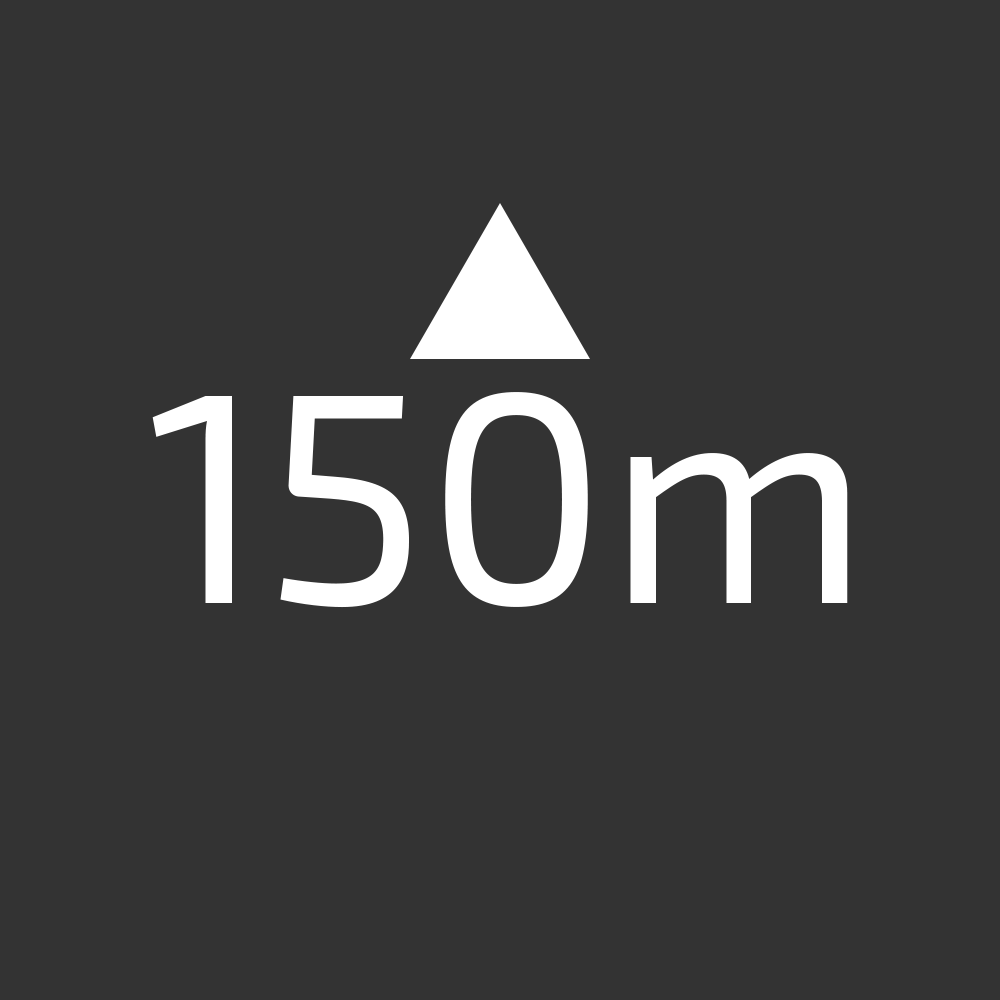
<style>
.page{position:relative;width:1000px;height:1000px;background:#333333}
.page>*{position:absolute;margin:0}
.t1{font:300px "Exo2-Regular";color:#ffffff}
</style>
<div class="page">
<p class="t1" style="left:152px;top:392px;width:696px;height:216px">150m</p>
</div>
